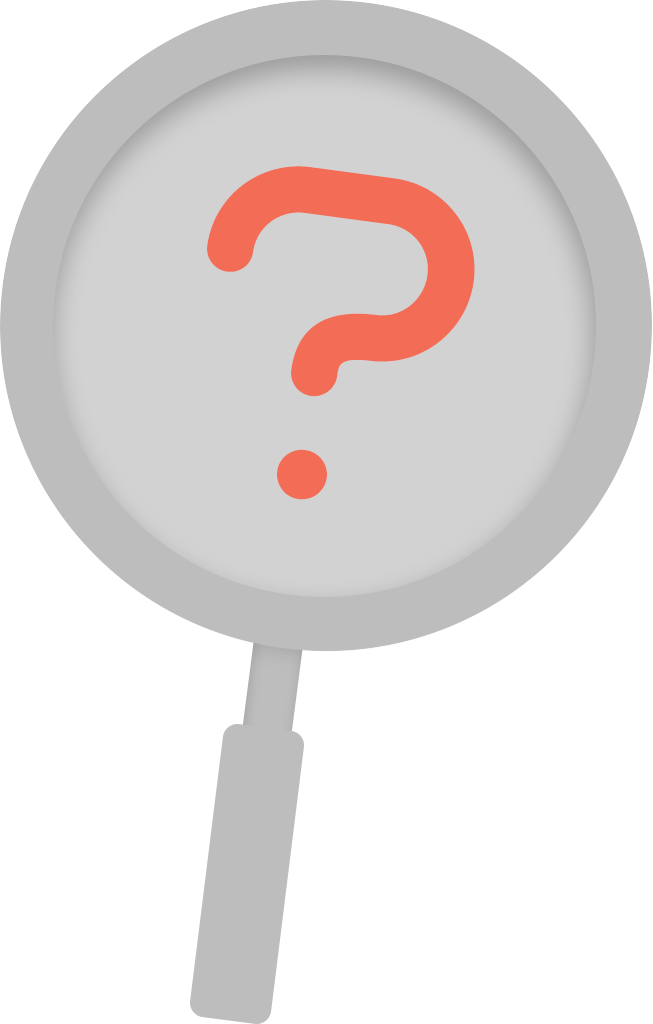
<style>
.page{position:relative;width:653px;height:1024px;background:#ffffff}
.page>*{position:absolute;margin:0}
.t1{font:459.4px "Weston-Free";color:#f36c56}
</style>
<div class="page">
<p class="t1" style="left:207px;top:166px;width:268px;height:334px;rotate:8deg">?</p>
</div>
